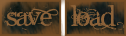
<style>
.page{position:relative;width:126px;height:36px}
.page>*{position:absolute;margin:0}
.t1{font:30.7px "AngelicWar";color:#8c6239}
</style>
<div class="page">
<p class="t1" style="left:2px;top:4px;width:57px;height:26px">SAVE</p>
<p class="t1" style="left:70px;top:4px;width:55px;height:26px">load</p>
</div>
